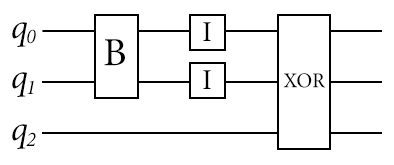
<style>
.page{position:relative;width:394px;height:165px;background:#ffffff}
.page>*{position:absolute;margin:0}
.t1{font:35px "MinionPro-It";color:#000000}
.t2{font:21px "MinionPro-It";color:#000000}
.t3{font:29px "MinionPro-Regular";color:#000000}
.t4{font:40px "MinionPro-Regular";color:#000000}
.t5{font:21px "MinionPro-Regular";color:#000000}
</style>
<div class="page">
<p class="t1" style="left:12px;top:22px;width:15px;height:25px">q</p>
<p class="t2" style="left:27px;top:29px;width:9px;height:15px">0</p>
<p class="t3" style="left:203px;top:22px;width:8px;height:19px">I</p>
<p class="t4" style="left:104px;top:39px;width:21px;height:27px">B</p>
<p class="t1" style="left:12px;top:72px;width:15px;height:25px">q</p>
<p class="t3" style="left:203px;top:70px;width:8px;height:19px">I</p>
<p class="t5" style="left:283px;top:73px;width:43px;height:15px">XOR</p>
<p class="t2" style="left:27px;top:80px;width:7px;height:14px">1</p>
<p class="t1" style="left:12px;top:124px;width:15px;height:25px">q</p>
<p class="t2" style="left:26px;top:132px;width:10px;height:14px">2</p>
</div>
